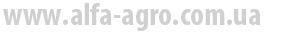
<style>
.page{position:relative;width:300px;height:52px;background:#ffffff}
.page>*{position:absolute;margin:0}
.t1{font:32px "MyriadPro-BoldCond";color:#d0d0d0}
</style>
<div class="page">
<p class="t1" style="left:3px;top:3px;width:258px;height:28px">www.alfa-agro.com.ua</p>
</div>
